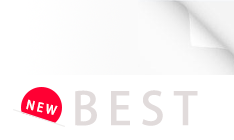
<style>
.page{position:relative;width:234px;height:140px;background:#ffffff}
.page>*{position:absolute;margin:0}
.t1{font:12px "AdobeHeitiStd-Regular";letter-spacing:0.2em;color:#fefefe}
.t2{font:44.7px "AdobeHeitiStd-Regular";letter-spacing:0.2em;color:#e1dbdb}
</style>
<div class="page">
<p class="t1" style="left:26px;top:99px;width:32px;height:16px;rotate:12deg">NEW</p>
<p class="t2" style="left:75px;top:90px;width:123px;height:36px">BEST</p>
</div>
